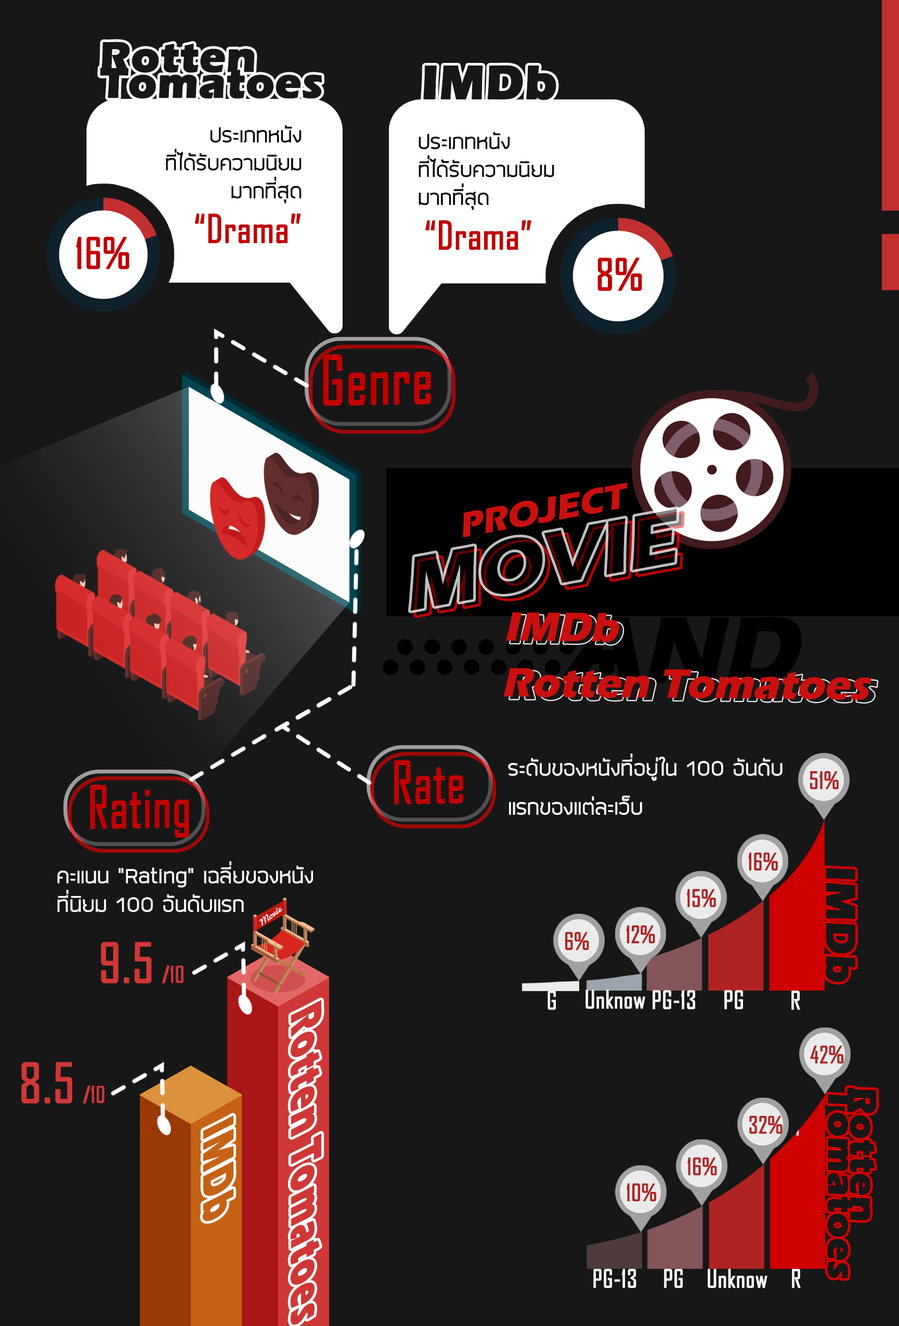
<style>
.page{position:relative;width:899px;height:1326px;background:#171717}
.page>*{position:absolute;margin:0}
.t1{font:43.2px/25.9px "ErasITC-Bold";color:#171717;font-weight:bold}
.t2{font:48.8px "ErasITC-Bold";color:#171717;font-weight:bold}
.t3{font:23.3px "SuperspaceLight";color:#000000;font-weight:bold}
.t4{font:37.3px "AgencyFB-Reg";color:#c10000;font-weight:bold}
.t5{font:40.8px "AgencyFB-Reg";color:#c10000;font-weight:bold}
.t6{font:41.8px "AgencyFB-Reg";color:#c10000;font-weight:bold}
.t7{font:64.8px "AgencyFB-Reg";color:#c10000;font-weight:bold;scale:0.87 1}
.t8{font:36px "ErasITC-Bold";color:#ca0f0f;font-style:italic}
.t9{font:42.2px "ErasITC-Bold";color:#ca0f0f;font-style:italic}
.t10{font:55.7px "AgencyFB-Reg";color:#c10000;font-weight:bold;scale:0.87 1}
.t11{font:23.8px/39px "SuperspaceLight";color:#ffffff;font-weight:bold}
.t12{font:22.6px "AgencyFB-Reg";color:#af2323;font-weight:bold}
.t13{font:23.8px "SuperspaceLight";color:#ffffff;font-weight:bold}
.t14{font:41.9px "ErasITC-Bold";color:#171717;font-weight:bold}
.t15{font:52px "AgencyFB-Reg";color:#d03737;font-weight:bold}
.t16{font:34.7px "BrowalliaNew";color:#d03737;font-weight:bold}
.t17{font:21.7px "AgencyFB-Reg";color:#d03737;font-weight:bold}
.t18{font:23.8px "AgencyFB-Reg";color:#ffffff;font-weight:bold}
.t19{font:49.5px "ErasITC-Bold";color:#d03737;font-weight:bold;scale:0.7 1}
.t20{font:37.1px/22.3px "ErasITC-Bold";color:#171717;font-weight:bold}
.t21{font:49.5px "ErasITC-Bold";color:#c66215;font-weight:bold;scale:0.7 1}
</style>
<div class="page">
<p class="t1" style="left:100px;top:42px;width:222px;height:57px">Rotten<br>Tomatoes</p>
<p class="t2" style="left:423px;top:65px;width:133px;height:35px">IMDb</p>
<p class="t3" style="left:166px;top:125px;width:136px;height:118px;text-align:right">ประเภทหนัง<br>ที่ได้รับความนิยม<br>มากที่สุด<br><span class="t4"> “Drama”</span></p>
<p class="t3" style="left:419px;top:132px;width:135px;height:118px">ประเภทหนัง<br>ที่ได้รับความนิยม<br>มากที่สุด<br><span class="t4"> “Drama”</span></p>
<p class="t5" style="left:76px;top:237px;width:53px;height:32px">16%</p>
<p class="t6" style="left:598px;top:257px;width:44px;height:34px">8%</p>
<p class="t7" style="left:323px;top:354px;width:108px;height:52px;rotate:-1deg">Genre</p>
<p class="t8" style="left:463px;top:483px;width:165px;height:55px;rotate:-10deg">PROJECT</p>
<p class="t9" style="left:506px;top:612px;width:113px;height:30px">IMDb</p>
<p class="t9" style="left:503px;top:668px;width:369px;height:32px">Rotten Tomatoes</p>
<p class="t10" style="left:394px;top:760px;width:69px;height:45px;rotate:-1deg">Rate</p>
<p class="t11" style="left:508px;top:754px;width:275px;height:61px">ระดับของหนังที่อยู่ใน 100 อันดับ<br>แรกของแต่ละเว็บ</p>
<p class="t12" style="left:810px;top:771px;width:29px;height:18px">51%</p>
<p class="t10" style="left:90px;top:785px;width:99px;height:53px;rotate:-1deg">Rating</p>
<p class="t12" style="left:748px;top:852px;width:30px;height:19px">16%</p>
<p class="t13" style="left:57px;top:861px;width:256px;height:51px">คะแนน “Rating” เฉลี่ยของหนัง<br>ที่นิยม 100 อันดับแรก</p>
<p class="t14" style="left:825px;top:868px;width:30px;height:114px;rotate:90deg">IMDb</p>
<p class="t12" style="left:686px;top:889px;width:30px;height:18px">15%</p>
<p class="t12" style="left:626px;top:925px;width:29px;height:18px">12%</p>
<p class="t15" style="left:101px;top:942px;width:83px;height:41px">9.5 <span class="t16">/</span><span class="t17">10</span></p>
<p class="t12" style="left:565px;top:932px;width:24px;height:18px">6%</p>
<p class="t18" style="left:586px;top:990px;width:59px;height:19px">Unknow</p>
<p class="t19" style="left:290px;top:1000px;width:32px;height:325px;rotate:90deg">Rotten Tomatoes</p>
<p class="t18" style="left:548px;top:991px;width:8px;height:19px">G</p>
<p class="t18" style="left:653px;top:990px;width:42px;height:19px">PG-13</p>
<p class="t18" style="left:724px;top:990px;width:19px;height:19px">PG</p>
<p class="t18" style="left:792px;top:991px;width:8px;height:19px">R</p>
<p class="t12" style="left:810px;top:1045px;width:34px;height:19px">42%</p>
<p class="t15" style="left:21px;top:1062px;width:84px;height:42px">8.5 <span class="t16">/</span><span class="t17">10</span></p>
<p class="t20" style="left:827px;top:1087px;width:50px;height:192px;rotate:90deg">Rotten<br>Tomatoes</p>
<p class="t21" style="left:202px;top:1116px;width:32px;height:106px;rotate:90deg">IMDb</p>
<p class="t12" style="left:749px;top:1116px;width:34px;height:18px">32%</p>
<p class="t12" style="left:688px;top:1157px;width:29px;height:19px">16%</p>
<p class="t12" style="left:627px;top:1183px;width:29px;height:19px">10%</p>
<p class="t18" style="left:593px;top:1269px;width:44px;height:19px">PG-13</p>
<p class="t18" style="left:664px;top:1269px;width:19px;height:19px">PG</p>
<p class="t18" style="left:708px;top:1269px;width:60px;height:19px">Unknow</p>
<p class="t18" style="left:792px;top:1269px;width:9px;height:19px">R</p>
</div>
